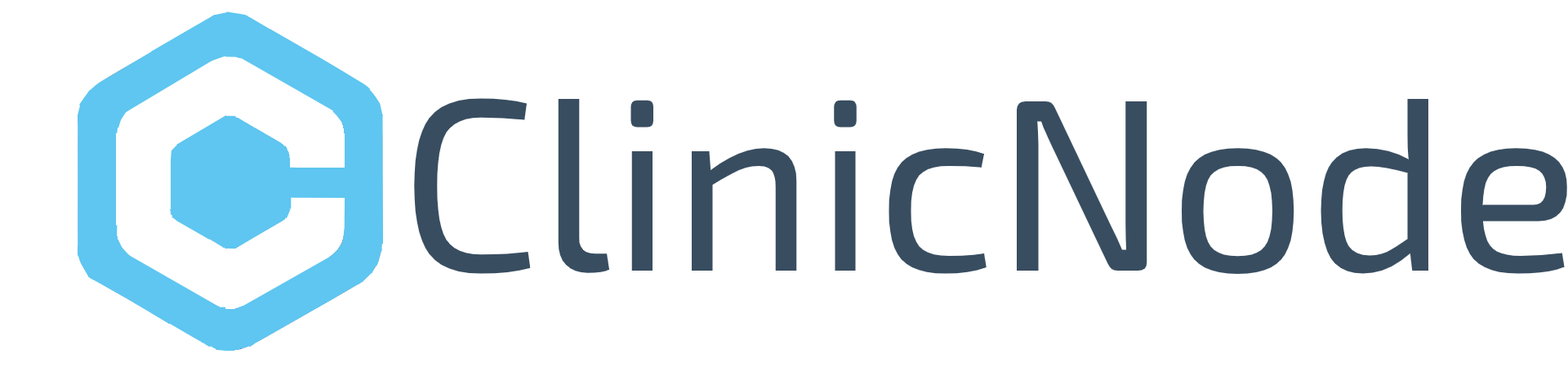
<style>
.page{position:relative;width:1568px;height:372px;background:#ffffff}
.page>*{position:absolute;margin:0}
.t1{font:245px "Exo2-Regular";color:#384d60}
</style>
<div class="page">
<p class="t1" style="left:414px;top:98px;width:1154px;height:176px">ClinicNode</p>
</div>
